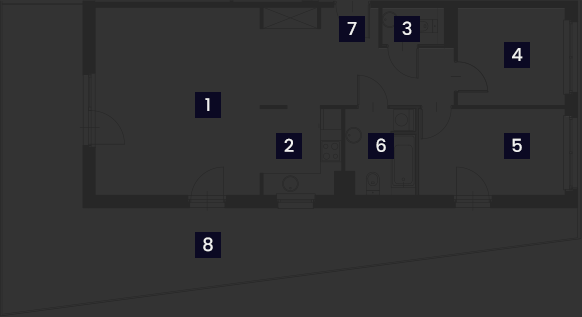
<style>
.page{position:relative;width:582px;height:317px;background:#333333}
.page>*{position:absolute;margin:0}
.t1{font:18px "Poppins-Medium";color:#f0f0f0}
</style>
<div class="page">
<p class="t1" style="left:347px;top:22px;width:10px;height:13px">7</p>
<p class="t1" style="left:402px;top:21px;width:10px;height:14px">3</p>
<p class="t1" style="left:512px;top:48px;width:11px;height:13px">4</p>
<p class="t1" style="left:284px;top:138px;width:10px;height:14px">2</p>
<p class="t1" style="left:376px;top:138px;width:10px;height:14px">6</p>
<p class="t1" style="left:512px;top:138px;width:10px;height:14px">5</p>
<p class="t1" style="left:203px;top:237px;width:10px;height:15px">8</p>
</div>
